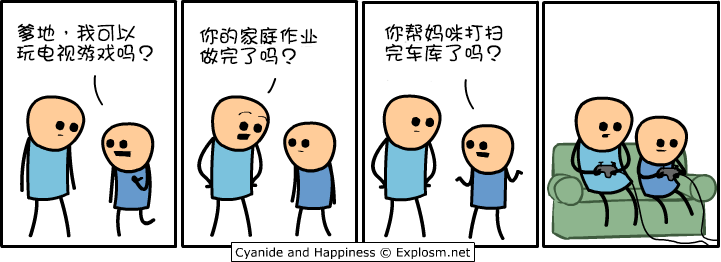
<style>
.page{position:relative;width:721px;height:262px;background:#ffffff}
.page>*{position:absolute;margin:0}
.t1{font:20px/20px "DFGirl";color:#000000}
</style>
<div class="page">
<p class="t1" style="left:17px;top:23px;width:136px;height:39px">爹地，我可以<br>玩电视游戏吗？</p>
<p class="t1" style="left:199px;top:26px;width:119px;height:39px">你的家庭作业<br>做完了吗？</p>
<p class="t1" style="left:384px;top:23px;width:119px;height:39px">你帮妈咪打扫<br>完车库了吗？</p>
</div>
